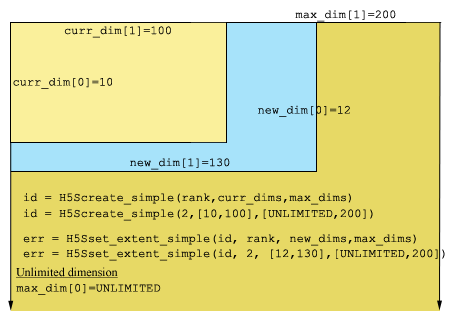
<style>
.page{position:relative;width:450px;height:324px;background:#e7d965}
.page>*{position:absolute;margin:0}
.t1{font:12px "CourierNewPSMT";color:#000000}
.t2{font:12px "CourierNewPSMT";color:#0a0d0f}
.t3{font:12px "TimesNewRomanPSMT";color:#000000;text-decoration:underline}
</style>
<div class="page">
<p class="t1" style="left:295px;top:10px;width:101px;height:12px">max_dim[1]=200</p>
<p class="t1" style="left:64px;top:26px;width:107px;height:12px">curr_dim[1]=100</p>
<p class="t1" style="left:13px;top:77px;width:99px;height:12px">curr_dim[0]=10</p>
<p class="t1" style="left:258px;top:105px;width:92px;height:12px">new_dim[0]=12</p>
<p class="t2" style="left:130px;top:158px;width:100px;height:12px">new_dim[1]=130</p>
<p class="t1" style="left:24px;top:193px;width:327px;height:12px">id = H5Screate_simple(rank,curr_dims,max_dims)</p>
<p class="t1" style="left:24px;top:209px;width:349px;height:12px">id = H5Screate_simple(2,[10,100],[UNLIMITED,200])</p>
<p class="t1" style="left:23px;top:234px;width:393px;height:12px">err = H5Sset_extent_simple(id, rank, new_dims,max_dims)</p>
<p class="t1" style="left:23px;top:249px;width:422px;height:12px">err = H5Sset_extent_simple(id, 2, [12,130],[UNLIMITED,200])</p>
<p class="t3" style="left:16px;top:267px;width:102px;height:11px">Unlimited dimension</p>
<p class="t1" style="left:16px;top:283px;width:145px;height:12px">max_dim[0]=UNLIMITED</p>
</div>
